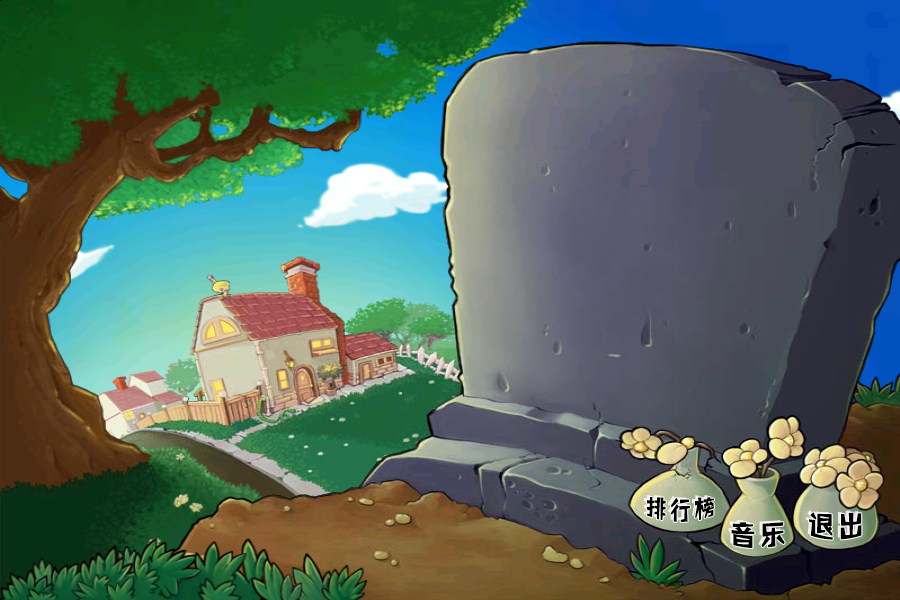
<style>
.page{position:relative;width:900px;height:600px}
.page>*{position:absolute;margin:0}
.t1{font:24px "HYQuHeiW";color:#000000}
.t2{font:30px "HYQuHeiW";color:#000000}
</style>
<div class="page">
<p class="t1" style="left:646px;top:497px;width:68px;height:25px">排行榜</p>
<p class="t2" style="left:809px;top:512px;width:53px;height:28px">退出</p>
<p class="t2" style="left:731px;top:522px;width:54px;height:27px">音乐</p>
</div>
